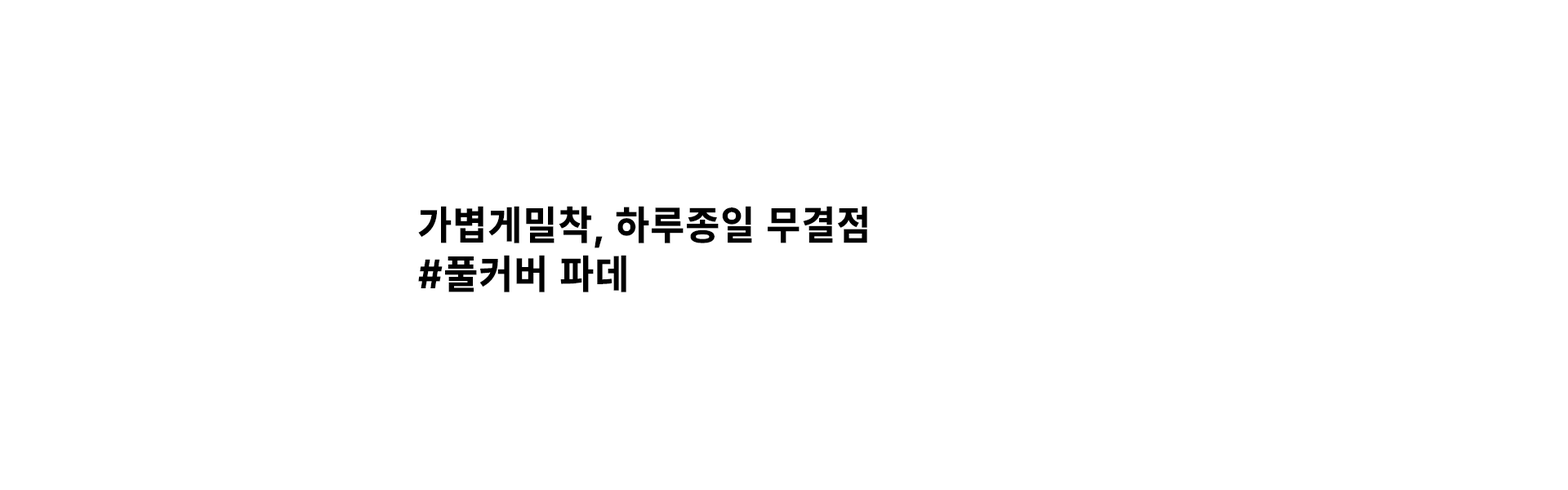
<style>
.page{position:relative;width:1568px;height:490px;background:#ffffff}
.page>*{position:absolute;margin:0}
.t1{font:40.8px "Pretendard-ExtraBold";letter-spacing:0.05em;color:#000000;scale:0.94 1}
</style>
<div class="page">
<p class="t1" style="left:418px;top:206px;width:449px;height:86px">가볍게밀착, 하루종일 무결점<br>#풀커버 파데</p>
</div>
